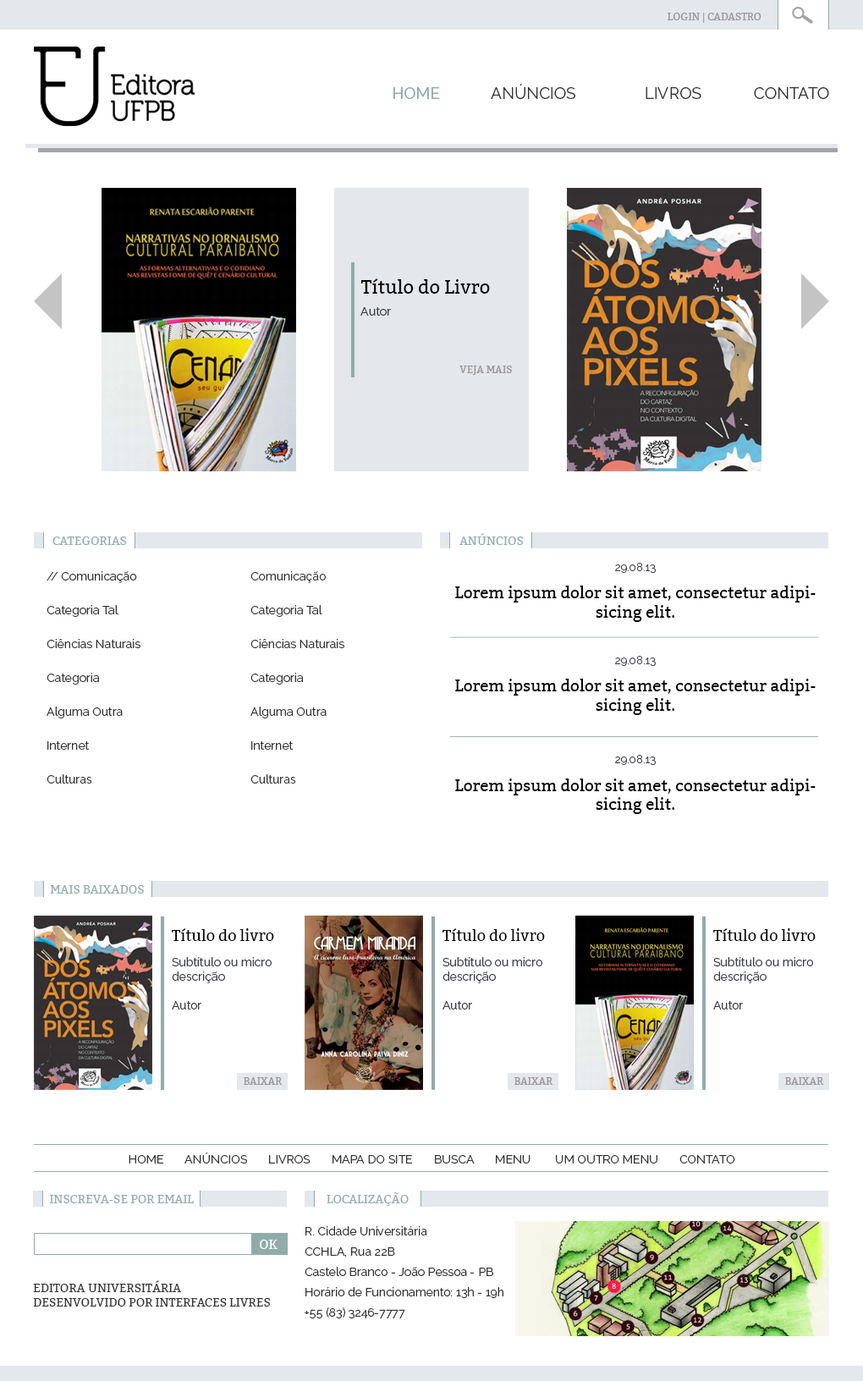
<style>
.page{position:relative;width:863px;height:1381px;background:#ffffff}
.page>*{position:absolute;margin:0}
.t1{font:10.2px "Bitter-Regular";color:#999797;text-transform:uppercase}
.t2{font:16.1px "Raleway-Medium";color:#90aca9}
.t3{font:16.1px "Raleway-Regular";color:#323232}
.t4{font:18.6px "Bitter-Regular";color:#000000}
.t5{font:11.8px "Raleway-Regular";color:#393b40}
.t6{font:11.8px "Bitter-Regular";color:#90aca9;text-transform:uppercase}
.t7{font:11.2px "Raleway-Regular";color:#45474d}
.t8{font:11.8px/33.9px "Raleway-Regular";color:#323232}
.t9{font:16px "Bitter-Regular";color:#000000}
.t10{font:15.2px "Bitter-Regular";color:#000000}
.t11{font:11.8px "Raleway-Regular";color:#323232;text-transform:uppercase}
.t12{font:11.8px/20.3px "Raleway-Regular";color:#323232}
.t13{font:12.6px "Bitter-Regular";color:#ffffff;text-transform:uppercase}
.t14{font:11.8px "Bitter-Regular";color:#323232;text-transform:uppercase}
</style>
<div class="page">
<p class="t1" style="left:668px;top:13px;width:94px;height:10px">Login | Cadastro</p>
<p class="t2" style="left:394px;top:87px;width:46px;height:12px">HOME</p>
<p class="t3" style="left:491px;top:84px;width:85px;height:15px">ANÚNCIOS</p>
<p class="t3" style="left:646px;top:87px;width:56px;height:12px">LIVROS</p>
<p class="t3" style="left:754px;top:87px;width:75px;height:12px">CONTATO</p>
<p class="t4" style="left:361px;top:278px;width:129px;height:16px">Título do Livro</p>
<p class="t5" style="left:361px;top:307px;width:30px;height:9px">Autor</p>
<p class="t1" style="left:460px;top:366px;width:52px;height:9px">Veja mais</p>
<p class="t6" style="left:459px;top:533px;width:64px;height:12px">Anúncios</p>
<p class="t6" style="left:52px;top:537px;width:74px;height:8px">categorias</p>
<p class="t7" style="left:615px;top:563px;width:41px;height:11px">29.08.13</p>
<p class="t8" style="left:47px;top:571px;width:93px;height:213px">// Comunicação <br>Categoria Tal<br>Ciências Naturais<br>Categoria<br>Alguma Outra<br>Internet<br>Culturas</p>
<p class="t8" style="left:251px;top:571px;width:93px;height:213px">Comunicação <br>Categoria Tal<br>Ciências Naturais<br>Categoria<br>Alguma Outra<br>Internet<br>Culturas</p>
<p class="t9" style="left:455px;top:586px;width:361px;height:36px;text-align:center">Lorem ipsum dolor sit amet, consectetur adipisicing elit.</p>
<p class="t7" style="left:615px;top:656px;width:41px;height:11px">29.08.13</p>
<p class="t9" style="left:455px;top:679px;width:361px;height:36px;text-align:center">Lorem ipsum dolor sit amet, consectetur adipisicing elit.</p>
<p class="t7" style="left:615px;top:755px;width:41px;height:11px">29.08.13</p>
<p class="t9" style="left:455px;top:779px;width:361px;height:35px;text-align:center">Lorem ipsum dolor sit amet, consectetur adipisicing elit.</p>
<p class="t6" style="left:50px;top:885px;width:94px;height:9px">mais baixados</p>
<p class="t10" style="left:172px;top:928px;width:102px;height:13px">Título do livro</p>
<p class="t10" style="left:443px;top:928px;width:102px;height:13px">Título do livro</p>
<p class="t10" style="left:713px;top:928px;width:103px;height:13px">Título do livro</p>
<p class="t5" style="left:172px;top:957px;width:100px;height:53px">Subtítulo ou micro descrição<br><br>Autor</p>
<p class="t5" style="left:443px;top:957px;width:100px;height:53px">Subtítulo ou micro descrição<br><br>Autor</p>
<p class="t5" style="left:713px;top:957px;width:100px;height:53px">Subtítulo ou micro descrição<br><br>Autor</p>
<p class="t1" style="left:244px;top:1077px;width:39px;height:8px">baixar</p>
<p class="t1" style="left:515px;top:1077px;width:39px;height:8px">baixar</p>
<p class="t1" style="left:785px;top:1077px;width:39px;height:8px">baixar</p>
<p class="t11" style="left:129px;top:1153px;width:606px;height:11px">home       Anúncios       livros       mapa do site       busca       menu        um outro menu       contato</p>
<p class="t6" style="left:327px;top:1193px;width:82px;height:13px">Localização</p>
<p class="t6" style="left:49px;top:1195px;width:145px;height:9px">Inscreva-se por email</p>
<p class="t12" style="left:305px;top:1226px;width:199px;height:93px">R. Cidade Universitária<br>CCHLA, Rua 22B <br>Castelo Branco - João Pessoa - PB <br>Horário de Funcionamento: 13h - 19h <br>+55 (83) 3246-7777</p>
<p class="t13" style="left:260px;top:1240px;width:18px;height:9px">OK</p>
<p class="t14" style="left:33px;top:1281px;width:237px;height:26px">Editora universitária<br>desenvolvido por interfaces livres</p>
</div>
